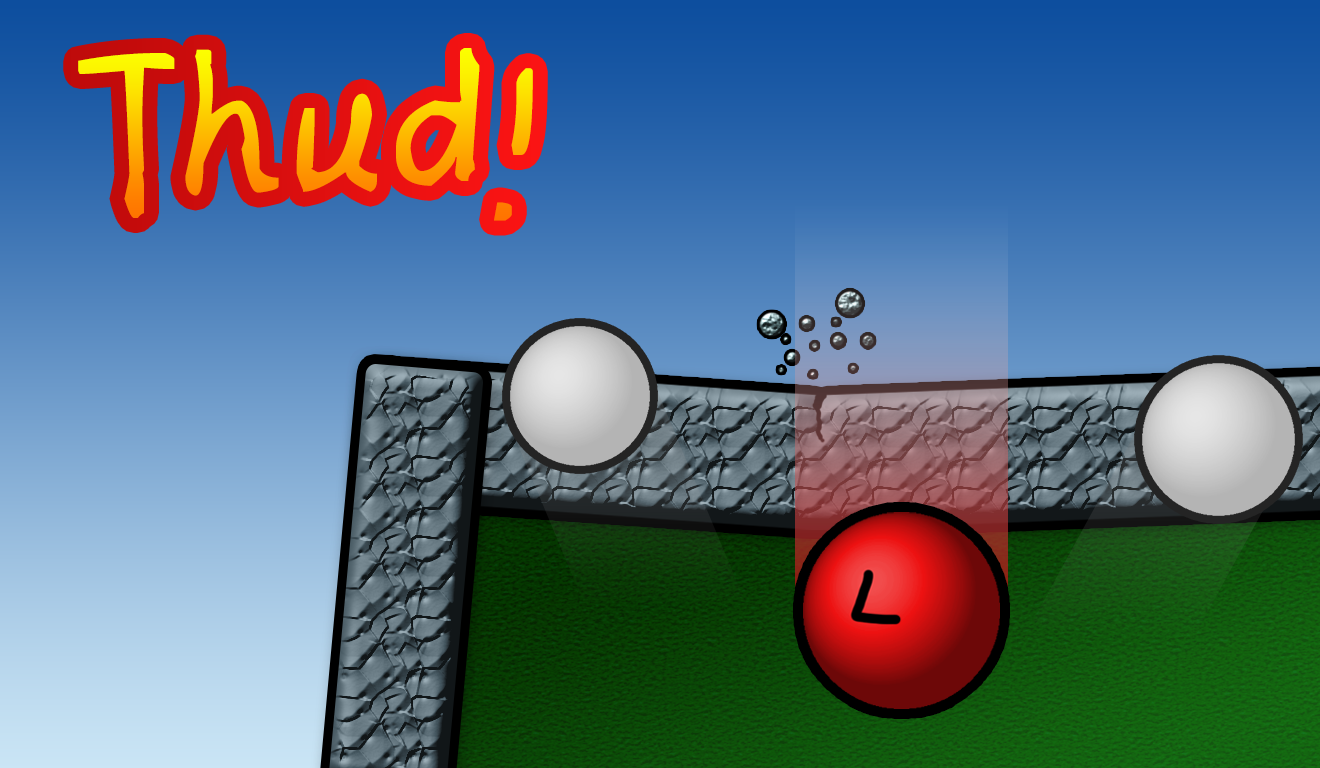
<style>
.page{position:relative;width:1320px;height:768px}
.page>*{position:absolute;margin:0}
.t1{font:240px "SentyMARUKO"}
</style>
<div class="page">
<p class="t1" style="left:78px;top:48px;width:455px;height:173px">Thud!</p>
</div>
